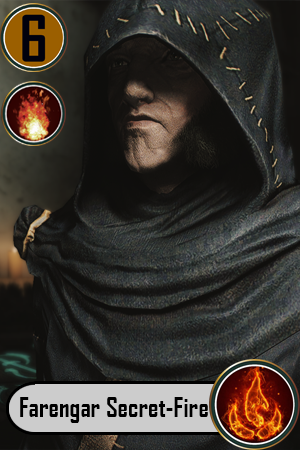
<style>
.page{position:relative;width:300px;height:450px}
.page>*{position:absolute;margin:0}
.t1{font:26px "AgencyFB-Bold";color:#000000}
</style>
<div class="page">
<p class="t1" style="left:20px;top:397px;width:188px;height:26px">Farengar Secret-Fire</p>
</div>
